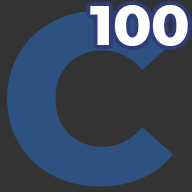
<style>
.page{position:relative;width:192px;height:192px;background:#333333}
.page>*{position:absolute;margin:0}
.t1{font:56.3px "Montserrat-ExtraBold";color:#ffffff}
.t2{font:241.3px "Montserrat-ExtraBold";color:#2d5282}
</style>
<div class="page">
<p class="t1" style="left:90px;top:5px;width:98px;height:41px">100</p>
<p class="t2" style="left:7px;top:10px;width:166px;height:177px">C</p>
</div>
